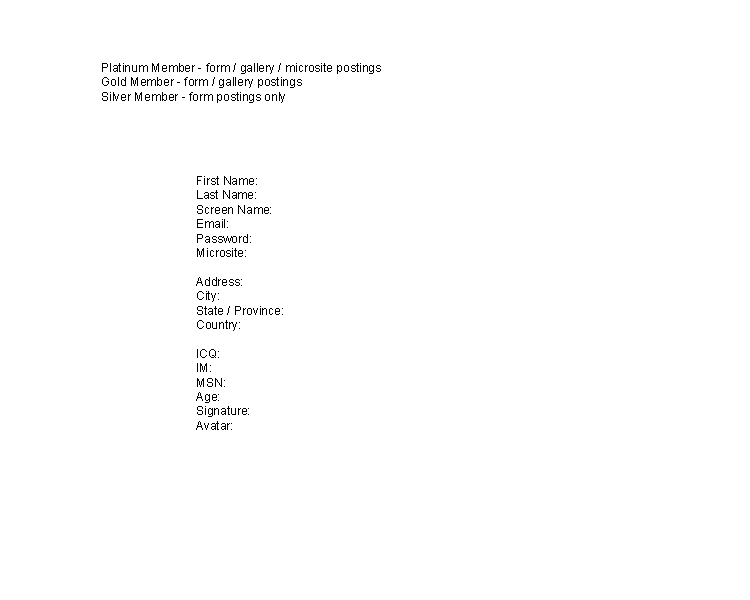
<style>
.page{position:relative;width:750px;height:600px;background:#ffffff}
.page>*{position:absolute;margin:0}
.t1{font:12px "ArialMT";color:#000000}
</style>
<div class="page">
<p class="t1" style="left:102px;top:63px;width:279px;height:40px">Platinum Member - form / gallery / microsite postings<br>Gold Member - form / gallery postings<br>Silver Member - form postings only</p>
<p class="t1" style="left:196px;top:176px;width:87px;height:254px">First Name:<br>Last Name:<br>Screen Name:<br>Email:<br>Password:<br>Microsite:<br><br>Address:<br>City:<br>State / Province:<br>Country:<br><br>ICQ:<br>IM:<br>MSN:<br>Age:<br>Signature:<br>Avatar:</p>
</div>
